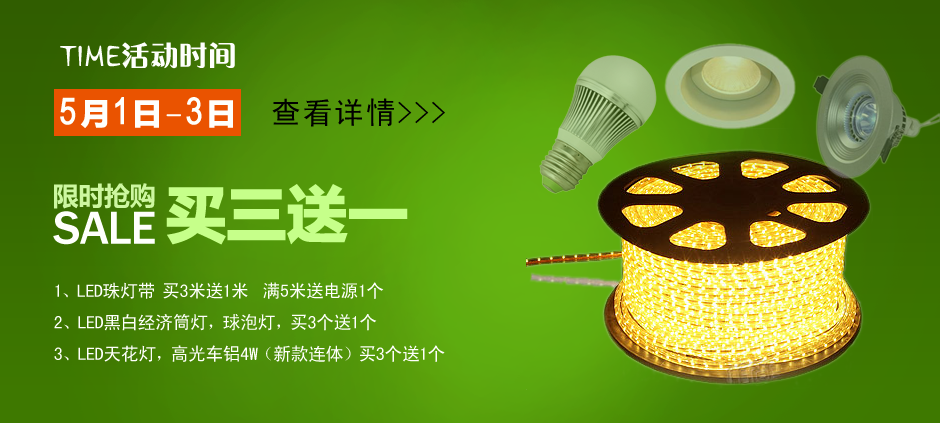
<style>
.page{position:relative;width:940px;height:423px}
.page>*{position:absolute;margin:0}
.t1{font:30px "OrangeLetPlain";letter-spacing:-0.005em;color:#fefffc}
.t2{font:30px "FZCHYJW--GB1-0";letter-spacing:-0.005em;color:#fefffc}
.t3{font:36px "ArialNarrow";letter-spacing:0.1em;color:#fefffc;font-weight:bold}
.t4{font:30px "MicrosoftYaHei";letter-spacing:0.1em;color:#fefffc;font-weight:bold}
.t5{font:30px "EstrangeloEdessa";letter-spacing:0.1em;color:#fefffc;font-weight:bold}
.t6{font:30px "SimHei";letter-spacing:0.075em;color:#000000}
.t7{font:26px/26px "MicrosoftYaHei";letter-spacing:-0.005em;color:#cdf7a0}
.t8{font:48px/26px "FranklinGothic-Medium";letter-spacing:-0.005em;color:#fefffc}
.t9{font:60px "MicrosoftYaHei";letter-spacing:-0.005em;color:#c6ff8a;font-weight:bold}
.t10{font:18px "SimHei";letter-spacing:-0.005em;color:#fefffc}
</style>
<div class="page">
<p class="t1" style="left:60px;top:42px;width:175px;height:86px">TIME<span class="t2">活动时间<br></span><span class="t3">5</span><span class="t4">月</span><span class="t3">1</span><span class="t4">日</span><span class="t5">-</span><span class="t3">3</span><span class="t4">日</span></p>
<p class="t6" style="left:272px;top:98px;width:173px;height:29px">查看详情&gt;&gt;&gt;</p>
<p class="t7" style="left:53px;top:183px;width:102px;height:62px">限时抢购<br><span class="t8">SALE</span></p>
<p class="t9" style="left:166px;top:184px;width:242px;height:61px">买三送一</p>
<p class="t10" style="left:54px;top:282px;width:391px;height:80px">1、LED珠灯带 买3米送1米  满5米送电源1个<br>2、LED黑白经济筒灯，球泡灯，买3个送1个<br>3、LED天花灯，高光车铝4W（新款连体）买3个送1个</p>
</div>
